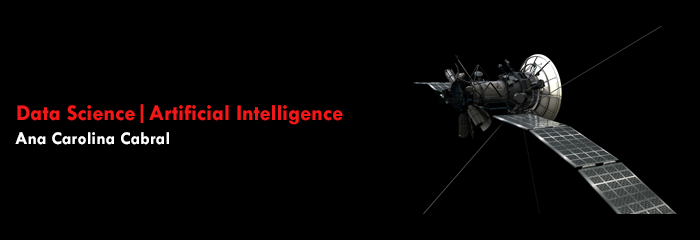
<style>
.page{position:relative;width:700px;height:240px;background:#000000}
.page>*{position:absolute;margin:0}
.t1{font:22.6px "TwCenMT-Bold";color:#f01818}
.t2{font:18.1px "TwCenMT-Bold";color:#ffffff}
</style>
<div class="page">
<p class="t1" style="left:17px;top:104px;width:326px;height:21px">Data Science|Artificial Intelligence</p>
<p class="t2" style="left:15px;top:132px;width:154px;height:13px">Ana Carolina Cabral</p>
</div>
